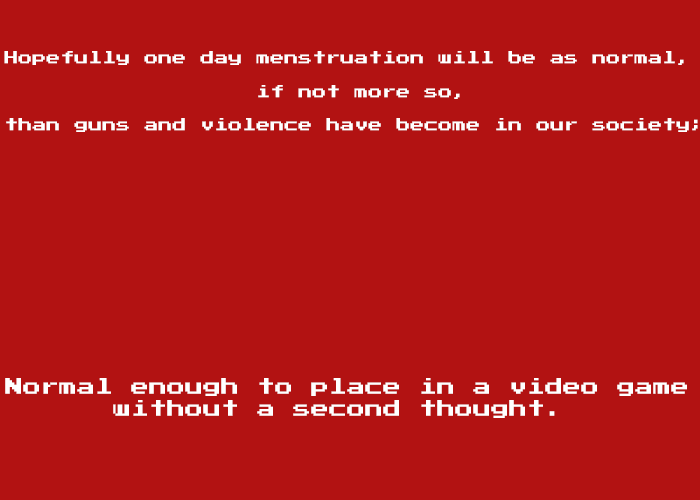
<style>
.page{position:relative;width:700px;height:500px;background:#b21212}
.page>*{position:absolute;margin:0}
.t1{font:14px "PressStart2P";color:#ffffff}
.t2{font:18px "PressStart2P";color:#ffffff}
</style>
<div class="page">
<p class="t1" style="left:4px;top:51px;width:694px;height:81px">Hopefully one day menstruation will be as normal,<br><br>       if not more so, <br><br>than guns and violence have become in our society;</p>
<p class="t2" style="left:5px;top:378px;width:682px;height:40px">Normal enough to place in a video game <br>    without a second thought.</p>
</div>
